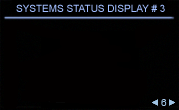
<style>
.page{position:relative;width:179px;height:110px;background:#020000}
.page>*{position:absolute;margin:0}
.t1{font:10px "ArialMT";color:#a2beff;font-variant:small-caps}
.t2{font:10px "ArialMT";color:#9fc3e3;font-variant:small-caps}
</style>
<div class="page">
<p class="t1" style="left:16px;top:4px;width:149px;height:8px">SYSTEMS STATUS DISPLAY # 3</p>
<p class="t2" style="left:161px;top:99px;width:6px;height:7px">6</p>
</div>
